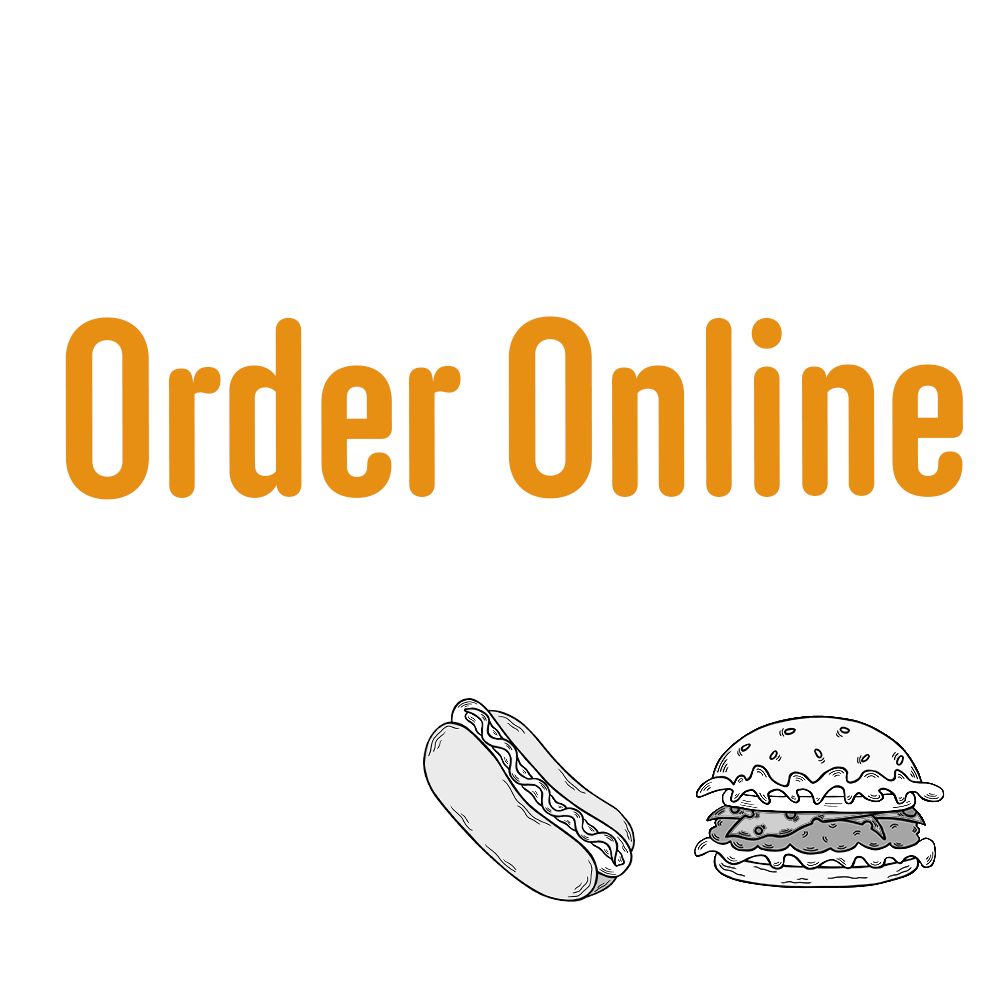
<style>
.page{position:relative;width:1000px;height:1000px;background:#ffffff}
.page>*{position:absolute;margin:0}
.t1{font:250px "Anchor-Medium";color:#e78f12}
</style>
<div class="page">
<p class="t1" style="left:65px;top:316px;width:898px;height:184px">Order Online</p>
</div>
